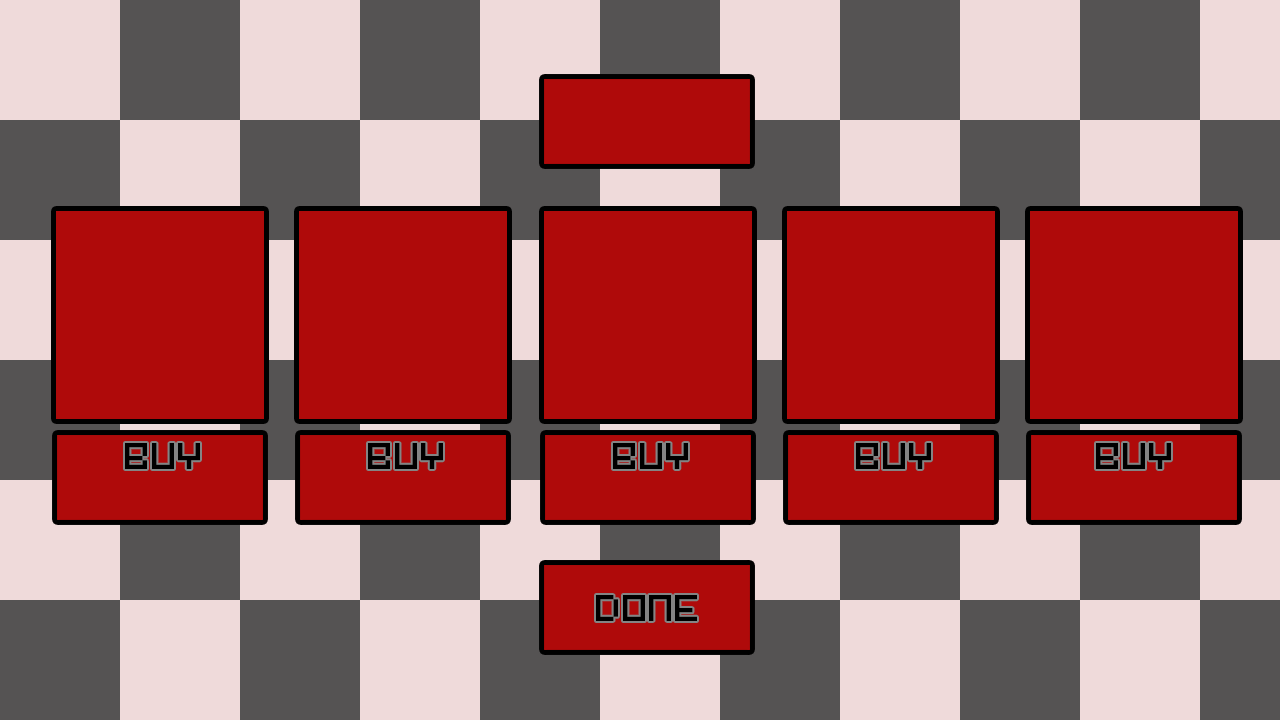
<style>
.page{position:relative;width:1280px;height:720px;background:#af0a0a}
.page>*{position:absolute;margin:0}
.t1{font:34.8px "Pixel-Art";color:#000000}
</style>
<div class="page">
<p class="t1" style="left:125px;top:443px;width:75px;height:26px">BUY</p>
<p class="t1" style="left:368px;top:443px;width:75px;height:26px">BUY</p>
<p class="t1" style="left:613px;top:443px;width:75px;height:26px">BUY</p>
<p class="t1" style="left:856px;top:443px;width:75px;height:26px">BUY</p>
<p class="t1" style="left:1096px;top:443px;width:75px;height:26px">BUY</p>
<p class="t1" style="left:596px;top:595px;width:101px;height:26px">DONE</p>
</div>
